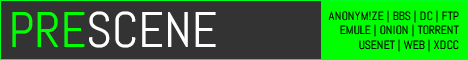
<style>
.page{position:relative;width:468px;height:60px;background:#333333}
.page>*{position:absolute;margin:0}
.t1{font:50px "Abel-Regular";color:#ffffff}
.t2{font:50px "Abel-Regular";color:#00ff00}
.t3{font:12px "Abel-Regular";color:#000000}
</style>
<div class="page">
<p class="t1" style="left:12px;top:11px;width:204px;height:37px"><span class="t2">PRE</span>SCENE</p>
<p class="t3" style="left:328px;top:10px;width:131px;height:42px;text-align:right">ANONYM!ZE | BBS | DC | FTP<br>EMULE | ONION | TORRENT<br>USENET | WEB | XDCC</p>
</div>
